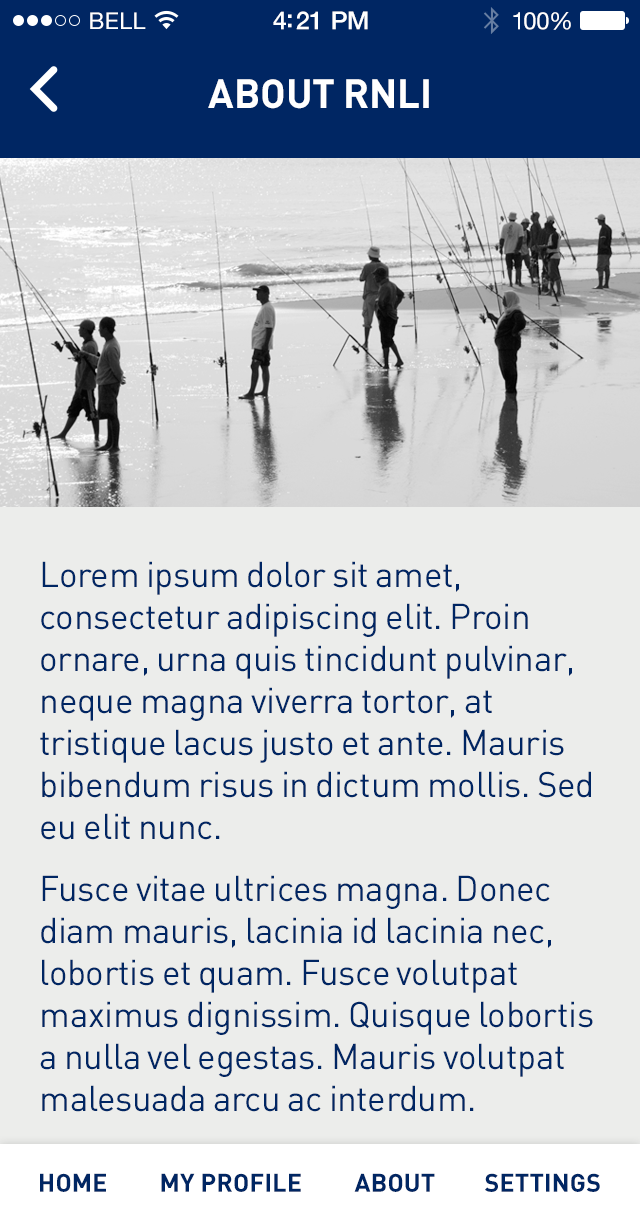
<style>
.page{position:relative;width:640px;height:1222px;background:#ecedeb}
.page>*{position:absolute;margin:0}
.t1{font:23px "HelveticaNeue";letter-spacing:0.02em;color:#ffffff}
.t2{font:25px "HelveticaNeue-Medium";letter-spacing:-0.02em;color:#ffffff}
.t3{font:24px "HelveticaNeue";letter-spacing:-0.02em;color:#ffffff}
.t4{font:40px "DIN-Bold";color:#ffffff;text-transform:uppercase}
.t5{font:35px "DIN-Regular";letter-spacing:-0.01em;color:#002663}
.t6{font:25px "DIN-Bold";letter-spacing:0.01em;color:#002663;text-transform:uppercase}
</style>
<div class="page">
<p class="t1" style="left:90px;top:12px;width:56px;height:17px">BELL</p>
<p class="t2" style="left:273px;top:11px;width:95px;height:19px">4:21 PM</p>
<p class="t3" style="left:513px;top:12px;width:58px;height:18px">100%</p>
<p class="t4" style="left:208px;top:79px;width:221px;height:30px">About RNLI</p>
<p class="t5" style="left:40px;top:561px;width:553px;height:551px">Lorem ipsum dolor sit amet, consectetur adipiscing elit. Proin ornare, urna quis tincidunt pulvinar, neque magna viverra tortor, at tristique lacus justo et ante. Mauris bibendum risus in dictum mollis. Sed eu elit nunc.<br>Fusce vitae ultrices magna. Donec diam mauris, lacinia id lacinia nec, lobortis et quam. Fusce volutpat maximus dignissim. Quisque lobortis a nulla vel egestas. Mauris volutpat malesuada arcu ac interdum.</p>
<p class="t6" style="left:40px;top:1173px;width:66px;height:19px">Home</p>
<p class="t6" style="left:161px;top:1173px;width:140px;height:19px">My Profile</p>
<p class="t6" style="left:354px;top:1173px;width:81px;height:19px">About</p>
<p class="t6" style="left:485px;top:1173px;width:115px;height:19px">Settings</p>
</div>
